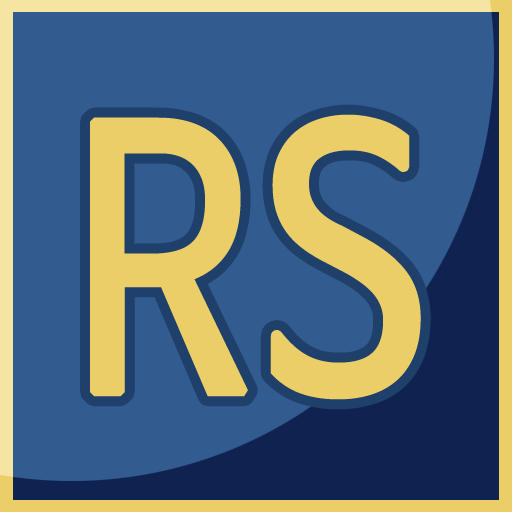
<style>
.page{position:relative;width:512px;height:512px;background:#325b8f}
.page>*{position:absolute;margin:0}
.t1{font:356.4px "NanumBarunGothic";color:#ecce68;font-weight:bold;scale:0.83 1}
</style>
<div class="page">
<p class="t1" style="left:90px;top:114px;width:331px;height:286px">RS</p>
</div>
